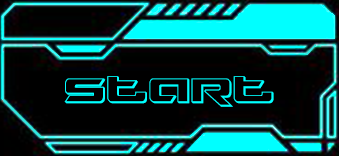
<style>
.page{position:relative;width:339px;height:156px}
.page>*{position:absolute;margin:0}
.t1{font:40px "Northstar3D";color:#00ffff}
</style>
<div class="page">
<p class="t1" style="left:64px;top:76px;width:210px;height:31px">start</p>
</div>
